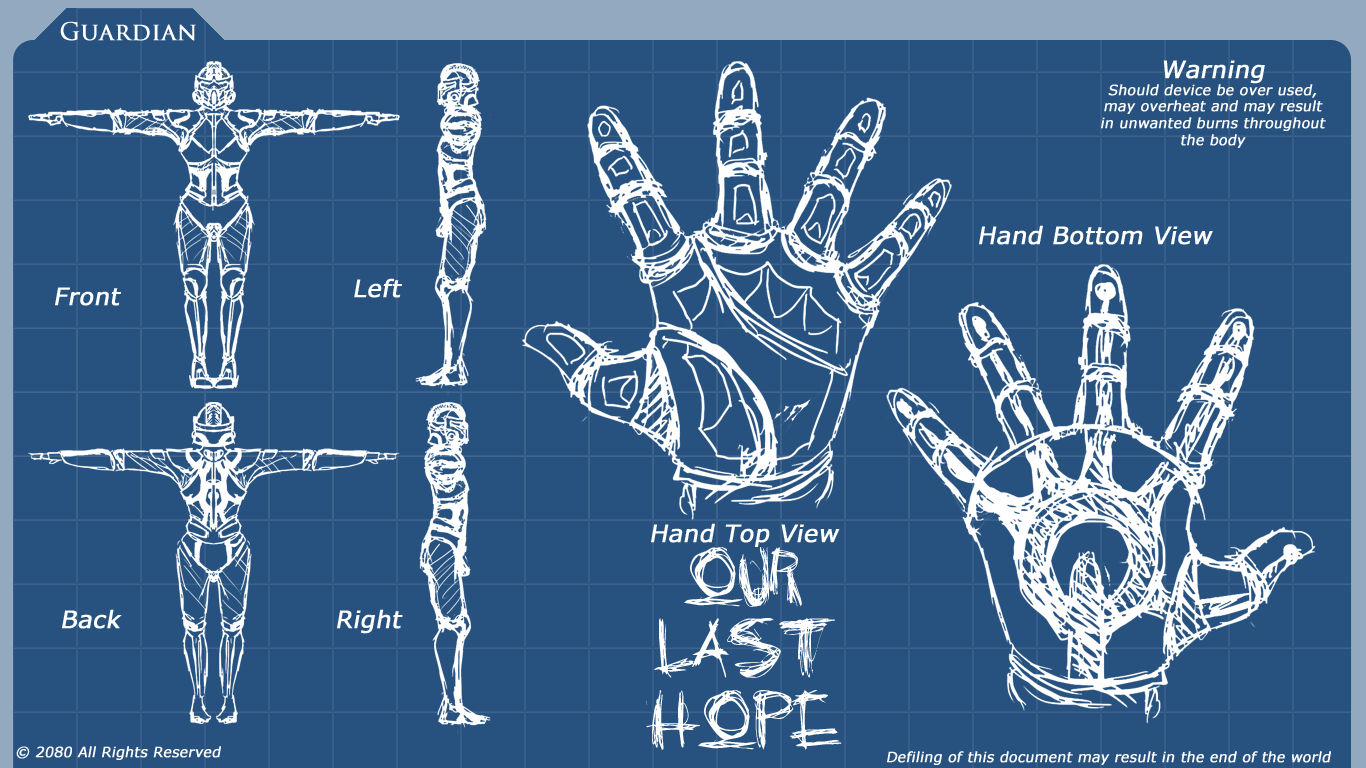
<style>
.page{position:relative;width:1366px;height:768px;background:#27527f}
.page>*{position:absolute;margin:0}
.t1{font:13.9px "Verdana";color:#ffffff;font-weight:bold;font-style:italic}
.t2{font:23.9px "Verdana";color:#ffffff;font-weight:bold;font-style:italic}
</style>
<div class="page">
<p class="t1" style="left:1101px;top:60px;width:225px;height:88px;text-align:center"><span class="t2">Warning<br></span>Should device be over used,<br>may overheat and may result<br>in unwanted burns throughout<br>the body</p>
<p class="t2" style="left:979px;top:225px;width:234px;height:20px">Hand Bottom View</p>
<p class="t2" style="left:354px;top:278px;width:48px;height:20px">Left</p>
<p class="t2" style="left:55px;top:287px;width:66px;height:19px">Front</p>
<p class="t2" style="left:651px;top:523px;width:189px;height:24px">Hand Top View</p>
<p class="t2" style="left:62px;top:609px;width:60px;height:20px">Back</p>
<p class="t2" style="left:337px;top:609px;width:66px;height:25px">Right</p>
<p class="t1" style="left:16px;top:746px;width:205px;height:14px">© 2080 All Rights Reserved</p>
<p class="t1" style="left:887px;top:751px;width:444px;height:14px">Defiling of this document may result in the end of the world</p>
</div>
